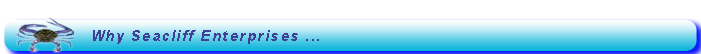
<style>
.page{position:relative;width:701px;height:54px;background:#ffffff}
.page>*{position:absolute;margin:0}
.t1{font:14.8px "Arial-BoldMT";letter-spacing:0.1em;color:#3e4095;font-style:italic}
</style>
<div class="page">
<p class="t1" style="left:93px;top:30px;width:226px;height:14px">Why Seacliff Enterprises ...</p>
</div>
